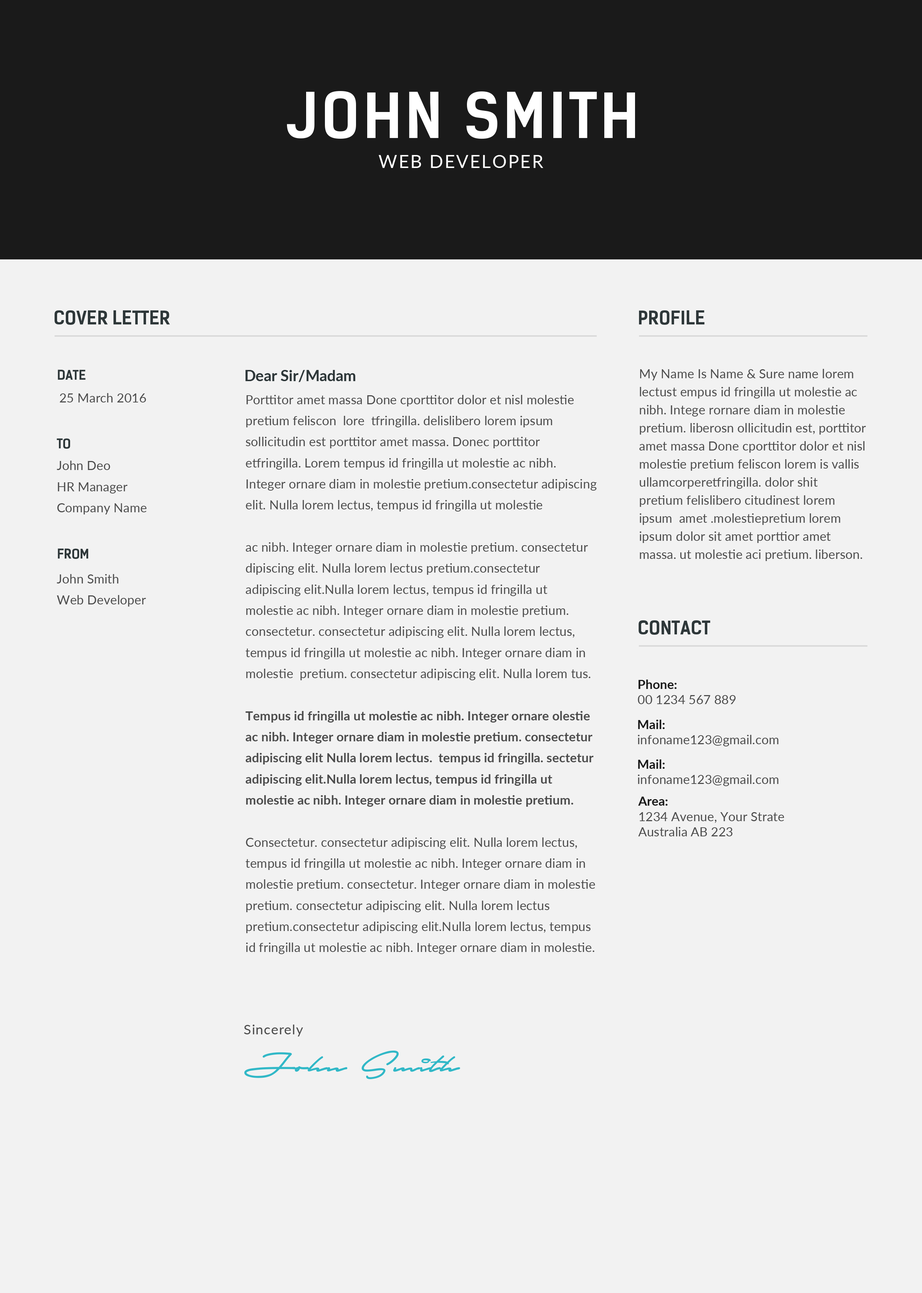
<style>
.page{position:relative;width:922px;height:1293px;background:#f2f2f2}
.page>*{position:absolute;margin:0}
.t1{font:60.2px "KelsonSans-Bold";letter-spacing:0.05em;color:#ffffff;text-transform:uppercase}
.t2{font:18.1px "Lato-Regular";letter-spacing:0.075em;color:#ffffff;text-transform:uppercase}
.t3{font:18.1px "KelsonSans-Bold";color:#2e3739;text-transform:uppercase}
.t4{font:12.8px "KelsonSans-Bold";color:#2e3739;text-transform:uppercase}
.t5{font:15px "Lato-Bold";color:#2e3739}
.t6{font:12.8px/18.1px "Lato-Regular";color:#4c4c4c}
.t7{font:12.8px "Lato-Regular";color:#4c4c4c}
.t8{font:12.8px/21.1px "Lato-Regular";color:#4c4c4c}
.t9{font:12.8px/21.1px "Lato-Bold";color:#4c4c4c}
.t10{font:12.8px "Lato-Bold";color:#1a1a1a}
.t11{font:13.6px "Lato-Regular";letter-spacing:0.05em;color:#4c4c4c}
</style>
<div class="page">
<p class="t1" style="left:287px;top:91px;width:348px;height:48px">John Smith</p>
<p class="t2" style="left:378px;top:155px;width:165px;height:13px">WEB DEVELOPER</p>
<p class="t3" style="left:55px;top:310px;width:115px;height:15px">COVER LETTER</p>
<p class="t3" style="left:639px;top:310px;width:65px;height:15px">PROFILE</p>
<p class="t4" style="left:58px;top:370px;width:28px;height:10px">DATE</p>
<p class="t5" style="left:245px;top:370px;width:110px;height:12px">Dear Sir/Madam</p>
<p class="t6" style="left:639px;top:369px;width:227px;height:192px">My Name Is Name &amp; Sure name lorem lectust empus id fringilla ut molestie ac nibh. Intege rornare diam in molestie pretium. liberosn ollicitudin est, porttitor amet massa Done cporttitor dolor et nisl molestie pretium feliscon lorem is vallis ullamcorperetfringilla. dolor shit  pretium felislibero citudinest lorem ipsum  amet .molestiepretium lorem ipsum dolor sit amet porttior amet massa. ut molestie aci pretium. liberson.</p>
<p class="t7" style="left:60px;top:393px;width:86px;height:10px">25 March 2016</p>
<p class="t8" style="left:245px;top:395px;width:352px;height:559px">Porttitor amet massa Done cporttitor dolor et nisl molestie pretium feliscon  lore  tfringilla. delislibero lorem ipsum sollicitudin est porttitor amet massa. Donec porttitor etfringilla. Lorem tempus id fringilla ut molestie ac nibh. Integer ornare diam in molestie pretium.consectetur adipiscing elit. Nulla lorem lectus, tempus id fringilla ut molestie<br><br>ac nibh. Integer ornare diam in molestie pretium. consectetur dipiscing elit. Nulla lorem lectus pretium.consectetur adipiscing elit.Nulla lorem lectus, tempus id fringilla ut molestie ac nibh. Integer ornare diam in molestie pretium. consectetur. consectetur adipiscing elit. Nulla lorem lectus, tempus id fringilla ut molestie ac nibh. Integer ornare diam in molestie  pretium. consectetur adipiscing elit. Nulla lorem tus.<br><br><span class="t9">Tempus id fringilla ut molestie ac nibh. Integer ornare olestie ac nibh. Integer ornare diam in molestie pretium. consectetur adipiscing elit Nulla lorem lectus.  tempus id fringilla. sectetur adipiscing elit.Nulla lorem lectus, tempus id fringilla ut molestie ac nibh. Integer ornare diam in molestie pretium. <br></span><br>Consectetur. consectetur adipiscing elit. Nulla lorem lectus, tempus id fringilla ut molestie ac nibh. Integer ornare diam in molestie pretium. consectetur. Integer ornare diam in molestie pretium. consectetur adipiscing elit. Nulla lorem lectus pretium.consectetur adipiscing elit.Nulla lorem lectus, tempus id fringilla ut molestie ac nibh. Integer ornare diam in molestie.</p>
<p class="t4" style="left:57px;top:438px;width:13px;height:11px">To</p>
<p class="t8" style="left:57px;top:461px;width:90px;height:54px">John Deo<br>HR Manager<br>Company Name</p>
<p class="t4" style="left:58px;top:549px;width:30px;height:10px">From</p>
<p class="t8" style="left:57px;top:574px;width:89px;height:33px">John Smith<br>Web Developer</p>
<p class="t3" style="left:639px;top:621px;width:71px;height:14px">CONTACT</p>
<p class="t7" style="left:638px;top:680px;width:98px;height:24px"><span class="t10">Phone:<br></span>00 1234 567 889</p>
<p class="t7" style="left:638px;top:720px;width:140px;height:27px"><span class="t10">Mail:<br></span>infoname123@gmail.com</p>
<p class="t7" style="left:638px;top:760px;width:140px;height:26px"><span class="t10">Mail:<br></span>infoname123@gmail.com</p>
<p class="t7" style="left:638px;top:797px;width:146px;height:40px"><span class="t10">Area:<br></span>1234 Avenue, Your Strate<br>Australia AB 223</p>
<p class="t11" style="left:244px;top:1025px;width:59px;height:12px">Sincerely</p>
</div>
